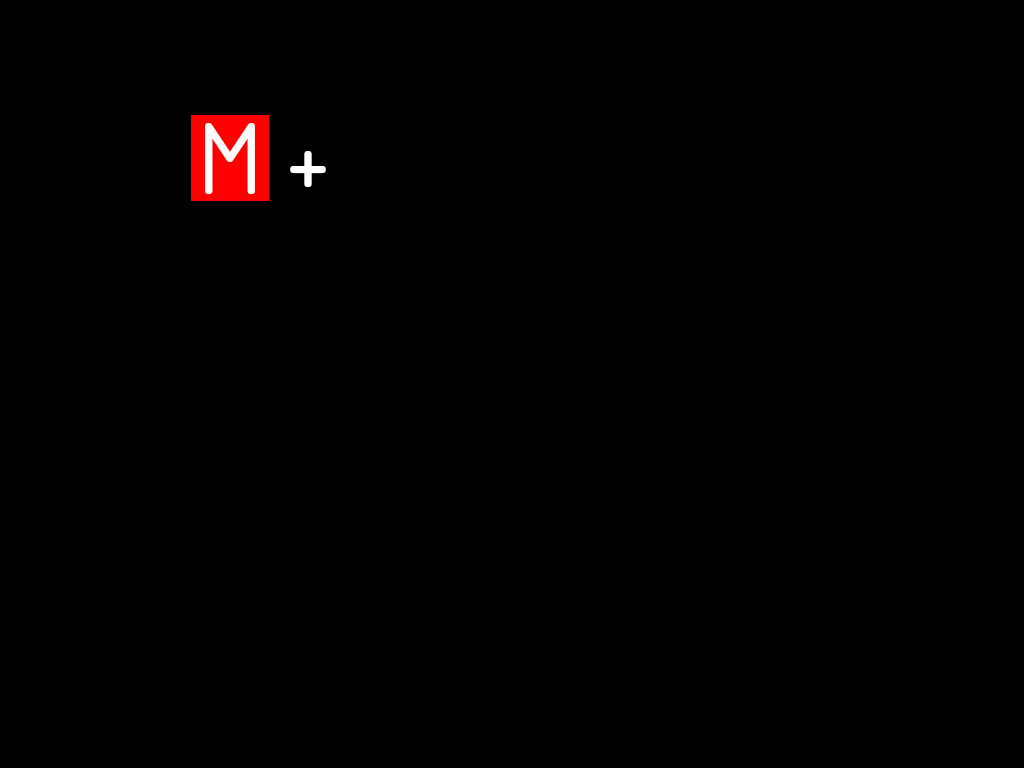
<style>
.page{position:relative;width:1024px;height:768px;background:#000000}
.page>*{position:absolute;margin:0}
.t1{font:110px "ISOCTEUR";color:#ffffff}
</style>
<div class="page">
<p class="t1" style="left:205px;top:123px;width:121px;height:71px">M+</p>
</div>
